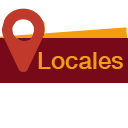
<style>
.page{position:relative;width:128px;height:128px;background:#ffffff}
.page>*{position:absolute;margin:0}
.t1{font:23.6px "HelveticaNeue-Medium";color:#f39c12}
</style>
<div class="page">
<p class="t1" style="left:38px;top:52px;width:85px;height:17px">Locales</p>
</div>
